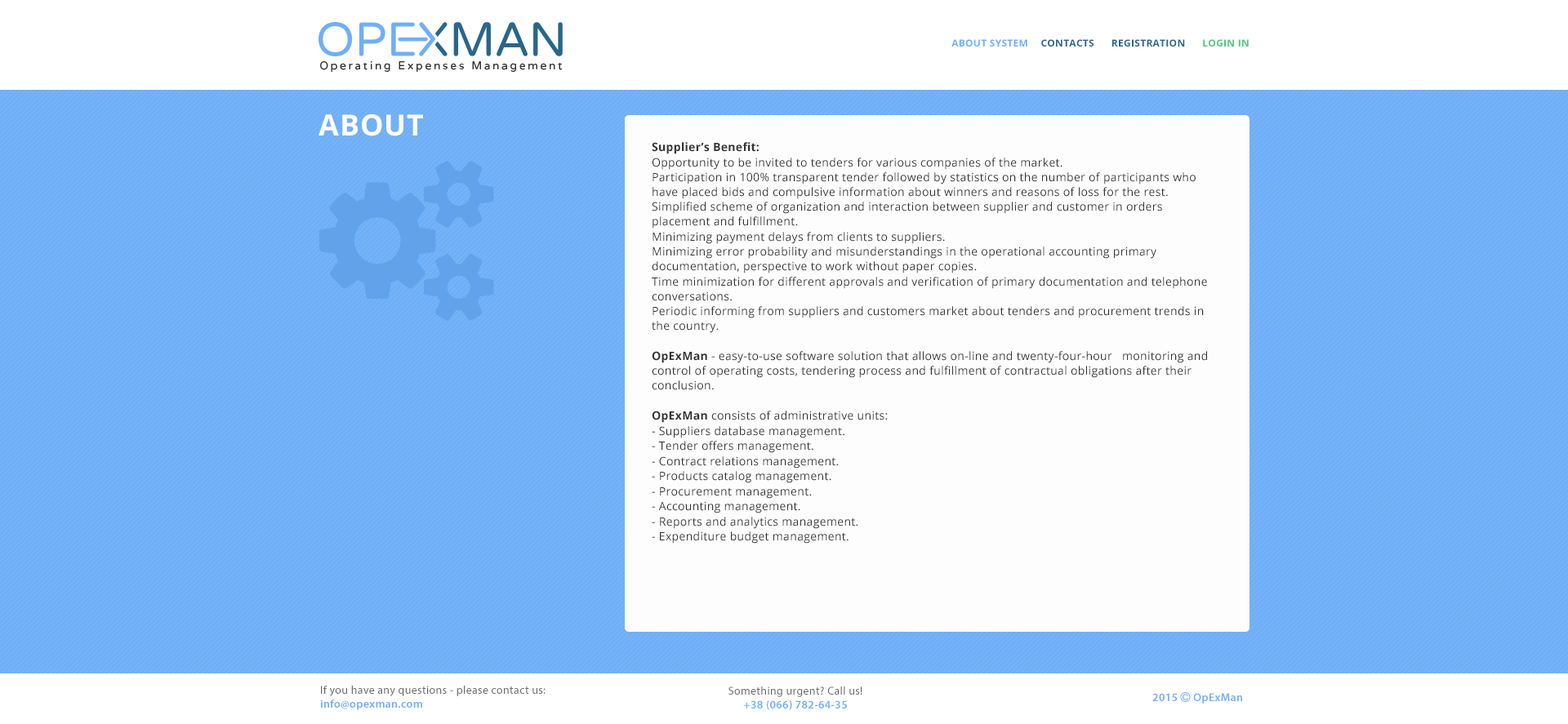
<style>
.page{position:relative;width:1568px;height:724px;background:#fdfdfd}
.page>*{position:absolute;margin:0}
.t1{font:9.8px "OpenSans-Bold";letter-spacing:0.025em;color:#70aff5;text-transform:uppercase}
.t2{font:9.8px "OpenSans-Bold";letter-spacing:0.025em;color:#29668a;text-transform:uppercase}
.t3{font:9.8px "OpenSans-Bold";letter-spacing:0.025em;color:#51c781;text-transform:uppercase}
.t4{font:29.3px "OpenSans-Bold";letter-spacing:0.025em;color:#fdfdfd;text-transform:uppercase}
.t5{font:11.4px/14.6px "OpenSans";letter-spacing:0.025em;color:#333333}
.t6{font:11.4px/14.6px "OpenSans-Bold";letter-spacing:0.025em;color:#333333}
.t7{font:11.4px "MyriadPro-Regular";letter-spacing:0.025em;color:#696969}
.t8{font:11.4px "MyriadPro-Semibold";letter-spacing:0.025em;color:#6eaef8}
</style>
<div class="page">
<p class="t1" style="left:951px;top:39px;width:76px;height:8px">About system</p>
<p class="t2" style="left:1041px;top:39px;width:53px;height:8px">Contacts</p>
<p class="t2" style="left:1111px;top:39px;width:74px;height:8px">Registration</p>
<p class="t3" style="left:1203px;top:39px;width:46px;height:8px">Login in</p>
<p class="t4" style="left:318px;top:114px;width:105px;height:22px">ABOUT</p>
<p class="t5" style="left:652px;top:142px;width:555px;height:402px"><span class="t6">Supplier’s Benefit:<br></span>Opportunity to be invited to tenders for various companies of the market.<br>Participation in 100% transparent tender followed by statistics on the number of participants who have placed bids and compulsive information about winners and reasons of loss for the rest.<br>Simplified scheme of organization and interaction between supplier and customer in orders placement and fulfillment.<br>Minimizing payment delays from clients to suppliers.<br>Minimizing error probability and misunderstandings in the operational accounting primary documentation, perspective to work without paper copies.<br>Time minimization for different approvals and verification of primary documentation and telephone conversations.<br>Periodic informing from suppliers and customers market about tenders and procurement trends in the country.<br><br><span class="t6">OpExMan</span> - easy-to-use software solution that allows on-line and twenty-four-hour   monitoring and control of operating costs, tendering process and fulfillment of contractual obligations after their conclusion.<br><br><span class="t6">OpExMan </span>consists of administrative units:<br>- Suppliers database management.<br>- Tender offers management.<br>- Contract relations management.<br>- Products catalog management.<br>- Procurement management.<br>- Accounting management.<br>- Reports and analytics management.<br>- Expenditure budget management.</p>
<p class="t7" style="left:320px;top:686px;width:226px;height:24px">If you have any questions - please contact us:<br><span class="t8">info@opexman.com</span></p>
<p class="t7" style="left:728px;top:687px;width:134px;height:23px;text-align:center">Something urgent? Call us!<br><span class="t8">+38 (066) 782-64-35</span></p>
</div>
